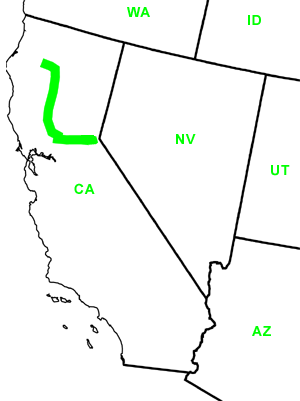
<style>
.page{position:relative;width:300px;height:401px;background:#ffffff}
.page>*{position:absolute;margin:0}
.t1{font:14px "Arial-BoldMT";letter-spacing:0.05em;color:#00ff01}
</style>
<div class="page">
<p class="t1" style="left:127px;top:7px;width:23px;height:10px">WA</p>
<p class="t1" style="left:248px;top:15px;width:13px;height:10px">ID</p>
<p class="t1" style="left:176px;top:134px;width:20px;height:10px">NV</p>
<p class="t1" style="left:271px;top:165px;width:19px;height:11px">UT</p>
<p class="t1" style="left:74px;top:183px;width:21px;height:11px">CA</p>
<p class="t1" style="left:252px;top:326px;width:19px;height:10px">AZ</p>
</div>
